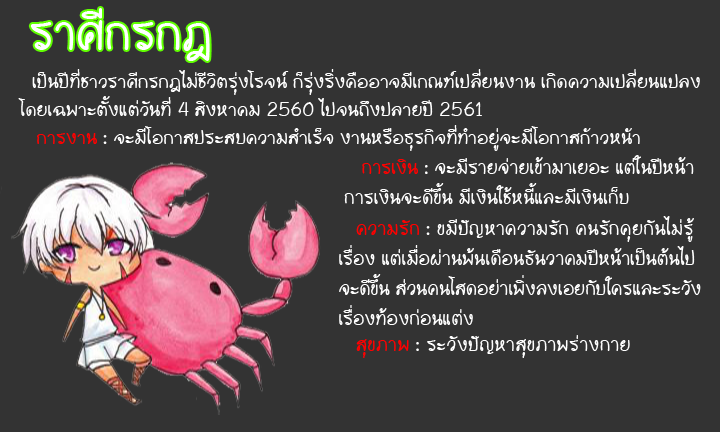
<style>
.page{position:relative;width:720px;height:432px;background:#333333}
.page>*{position:absolute;margin:0}
.t1{font:63.3px "WRTishkid";color:#ffffff;scale:0.95 1}
.t2{font:23.6px "WRTishkid";color:#ffffff}
.t3{font:24px "WRTishkid";color:#ffffff}
.t4{font:24px "WRTishkid";color:#ff0000}
.t5{font:24.9px "WRTishkid";color:#ffffff;scale:0.96 1}
.t6{font:24.9px "WRTishkid";color:#fe0000;scale:0.96 1}
.t7{font:25px "WRTishkid";color:#ffffff;scale:0.96 1}
.t8{font:25px "WRTishkid";color:#ff0000;scale:0.96 1}
.t9{font:25px "WRTishkid";letter-spacing:0.01em;color:#ff0000;scale:0.96 1}
.t10{font:25px "WRTishkid";letter-spacing:0.01em;color:#ffffff;scale:0.96 1}
.t11{font:25px "WRTishkid";letter-spacing:-0.005em;color:#ffffff;scale:0.96 1}
</style>
<div class="page">
<p class="t1" style="left:30px;top:8px;width:180px;height:53px">ราศีกรกฎ</p>
<p class="t2" style="left:18px;top:69px;width:682px;height:47px">เป็นปีที่ชาวราศีกรกฎไม่ชีวิตรุ่งโรจน์ ก็รุ่งริ่งคืออาจมีเกณฑ์เปลี่ยนงาน เกิดความเปลี่ยนแปลง<br> โดยเฉพาะตั้งแต่วันที่ 4 สิงหาคม 2560 ไปจนถึงปลายปี 2561</p>
<p class="t3" style="left:37px;top:125px;width:603px;height:26px"><span class="t4">   การงาน</span> : จะมีโอกาสประสบความสำเร็จ งานหรือธุรกิจที่ทำอยู่จะมีโอกาสก้าวหน้า</p>
<p class="t5" style="left:344px;top:155px;width:350px;height:49px"><span class="t6">การเงิน</span> : จะมีรายจ่ายเข้ามาเยอะ แต่ในปีหน้า<br>การเงินจะดีขึ้น มีเงินใช้หนี้และมีเงินเก็บ</p>
<p class="t7" style="left:339px;top:216px;width:362px;height:109px"><span class="t8">   </span><span class="t9">ความรัก</span><span class="t10"> : ขมีปัญหาความรัก คนรักคุยกันไม่รู้<br></span>เรื่อง แต่เมื่อผ่านพ้นเดือนธันวาคมปีหน้าเป็นต้นไป<br><span class="t11">จะดีขึ้น ส่วนคนโสดอย่าเพิ่งลงเอยกับใครและระวัง<br></span>เรื่องท้องก่อนแต่ง</p>
<p class="t10" style="left:356px;top:335px;width:274px;height:23px"><span class="t8">   </span><span class="t9">สุขภาพ</span> : ระวังปัญหาสุขภาพร่างกาย</p>
</div>
